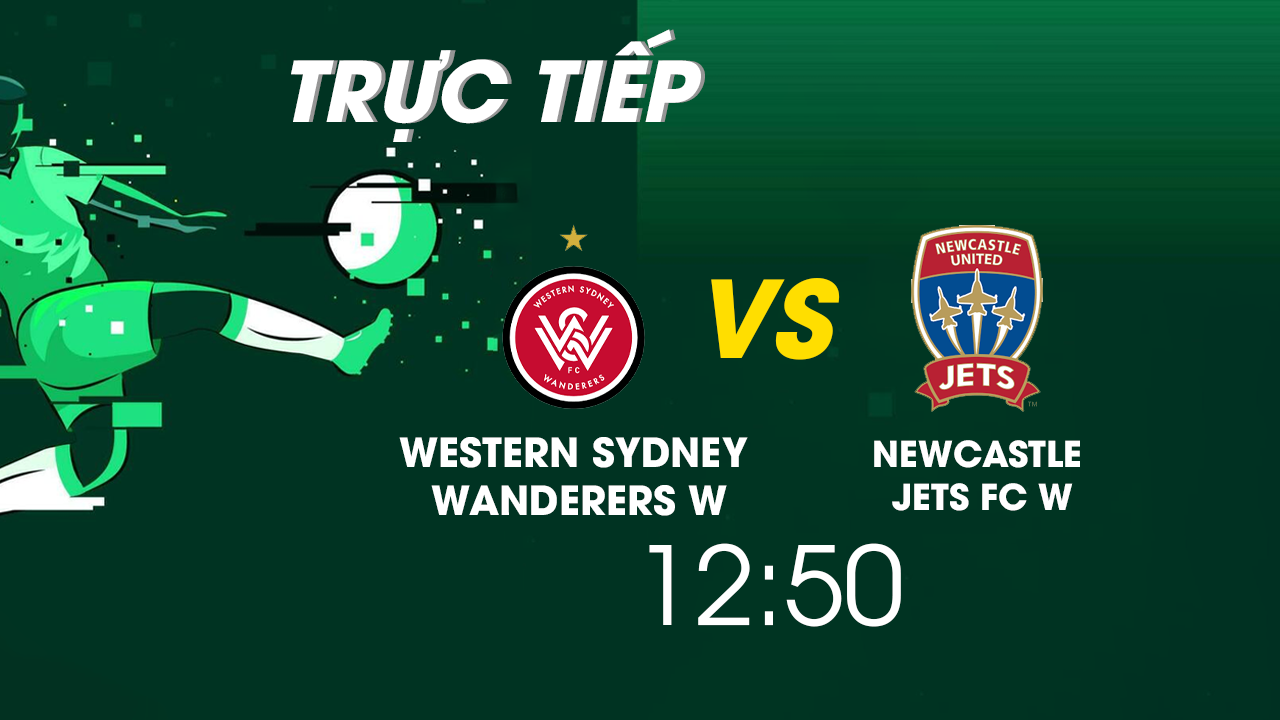
<style>
.page{position:relative;width:1280px;height:720px;background:#003322}
.page>*{position:absolute;margin:0}
.t1{font:83px "UTMAvo-BoldItalic";color:#ffffff;text-transform:uppercase}
.t2{font:106px "UTMAvo-BoldItalic";color:#ffde00;text-transform:uppercase}
.t3{font:39.9px "UTMAvoBold";color:#ffffff;text-transform:uppercase}
.t4{font:35.5px "UTMAvoBold";color:#ffffff;text-transform:uppercase}
.t5{font:108px "UTM-Avo";color:#ffffff;text-transform:uppercase}
</style>
<div class="page">
<p class="t1" style="left:291px;top:29px;width:410px;height:113px">trực tiếp</p>
<p class="t1" style="left:295px;top:29px;width:410px;height:113px">trực tiếp</p>
<p class="t2" style="left:711px;top:278px;width:129px;height:82px">vs</p>
<p class="t3" style="left:399px;top:437px;width:349px;height:79px;text-align:center">Western Sydney <br>Wanderers w</p>
<p class="t4" style="left:874px;top:440px;width:206px;height:71px;text-align:center">Newcastle <br>Jets FC W</p>
<p class="t5" style="left:649px;top:543px;width:252px;height:84px">12:50</p>
</div>
